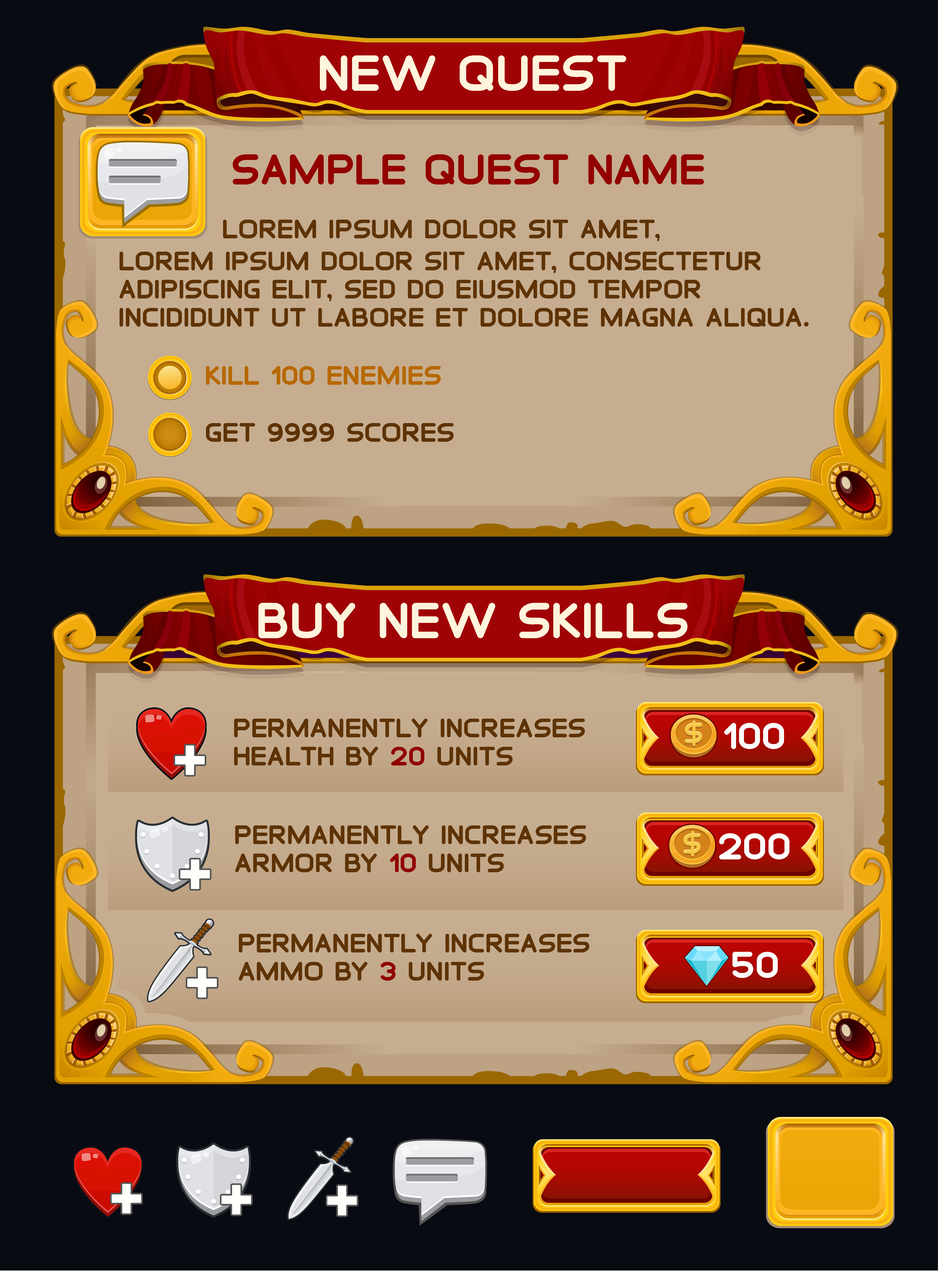
<style>
.page{position:relative;width:938px;height:1271px;background:#090b13}
.page>*{position:absolute;margin:0}
.t1{font:44.1px "SaranaiGame-Bold";color:#fff4dc}
.t2{font:37.5px "SaranaiGame-Bold";color:#930000}
.t3{font:23.5px "SaranaiGame-Bold";color:#5e3305}
.t4{font:23.5px "SaranaiGame-Bold";color:#b76800}
.t5{font:23.5px "SaranaiGame-Bold";color:#910000}
.t6{font:32.7px "SaranaiGame-Bold";color:#fdfefb}
</style>
<div class="page">
<p class="t1" style="left:320px;top:55px;width:307px;height:36px">new quest</p>
<p class="t2" style="left:233px;top:154px;width:471px;height:30px">Sample quest name</p>
<p class="t3" style="left:223px;top:220px;width:437px;height:21px">Lorem ipsum dolor sit amet, consectetur</p>
<p class="t3" style="left:120px;top:252px;width:689px;height:75px">Lorem ipsum dolor sit amet, consectetur adipiscing elit, sed do eiusmod tempor incididunt ut labore et dolore magna aliqua.</p>
<p class="t4" style="left:206px;top:366px;width:235px;height:19px">kill 100 enemies</p>
<p class="t3" style="left:206px;top:423px;width:248px;height:19px">get 9999 scores</p>
<p class="t1" style="left:259px;top:603px;width:429px;height:35px">buy new skills</p>
<p class="t3" style="left:234px;top:718px;width:351px;height:47px">permanently increases health by <span class="t5">20</span> units</p>
<p class="t6" style="left:725px;top:723px;width:59px;height:26px">100</p>
<p class="t3" style="left:235px;top:825px;width:351px;height:47px">permanently increases armor by <span class="t5">10</span> units</p>
<p class="t6" style="left:720px;top:833px;width:70px;height:26px">200</p>
<p class="t3" style="left:239px;top:933px;width:351px;height:47px">permanently increases ammo by <span class="t5">3</span> units</p>
<p class="t6" style="left:733px;top:952px;width:45px;height:26px">50</p>
</div>
